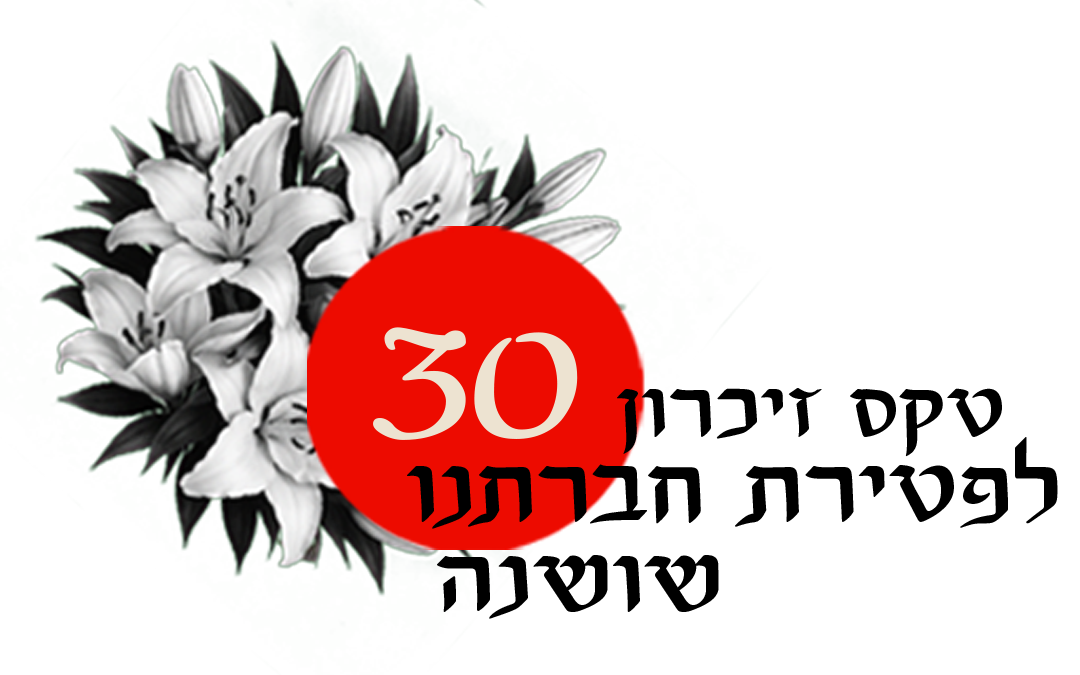
<style>
.page{position:relative;width:1080px;height:675px;background:#ffffff}
.page>*{position:absolute;margin:0}
.t1{font:192.1px "Cookie-Regular";letter-spacing:-0.025em;color:#ede3d1;scale:1.33 1}
.t2{font:89.4px/84.4px "NoaShalevAlefAlefAlef-Regular";color:#000000;scale:1.1 1}
.t3{font:76.1px/84.4px "NoaShalevAlefAlefAlef-Regular";color:#000000;scale:1.1 1}
.t4{font:89.4px/90.4px "NoaShalevAlefAlefAlef-Regular";color:#000000;scale:1.1 1}
</style>
<div class="page">
<p class="t1" style="left:373px;top:327px;width:205px;height:113px">30</p>
<p class="t2" style="left:407px;top:388px;width:651px;height:231px;text-align:right"><span class="t3">טקס זיכרון  <br></span>לפטירת חברתנו<br><span class="t4">שושנה</span></p>
</div>
